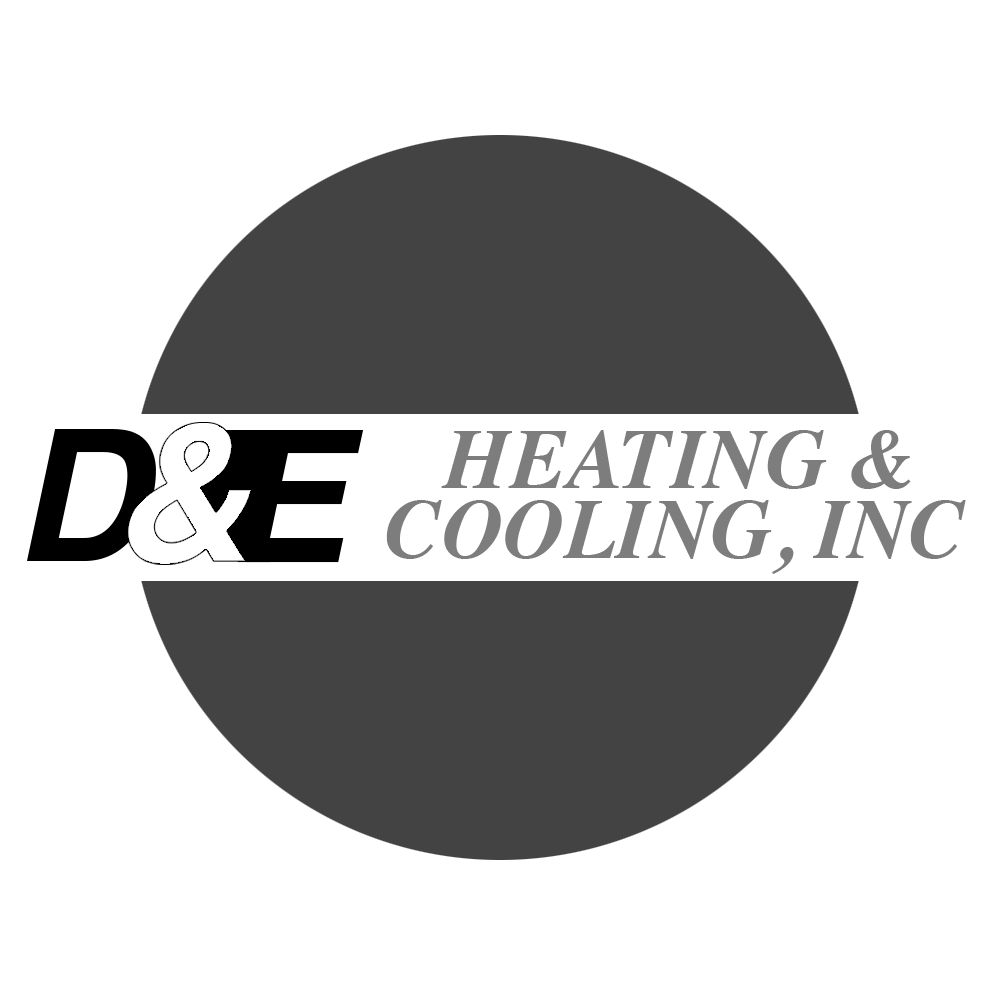
<style>
.page{position:relative;width:1000px;height:1000px;background:#ffffff}
.page>*{position:absolute;margin:0}
.t1{font:85px "Times-BoldItalic";color:#7d7d7d}
</style>
<div class="page">
<p class="t1" style="left:441px;top:430px;width:470px;height:59px">HEATING &amp;</p>
<p class="t1" style="left:386px;top:500px;width:580px;height:74px">COOLING, INC</p>
</div>
